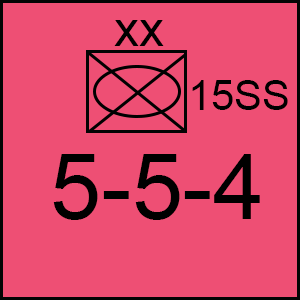
<style>
.page{position:relative;width:300px;height:300px;background:#ee4f74}
.page>*{position:absolute;margin:0}
.t1{font:50px "ArialMT";color:#000000}
.t2{font:41.7px "ArialMT";color:#000000}
.t3{font:91.7px "ArialMT";color:#000000}
</style>
<div class="page">
<p class="t1" style="left:114px;top:20px;width:50px;height:26px">xx</p>
<p class="t2" style="left:192px;top:80px;width:96px;height:30px">15SS</p>
<p class="t3" style="left:53px;top:154px;width:207px;height:66px">5-5-4</p>
</div>
